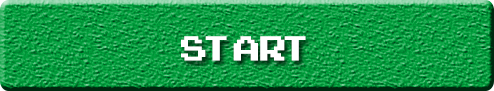
<style>
.page{position:relative;width:494px;height:91px}
.page>*{position:absolute;margin:0}
.t1{font:48px "ArcadeClassic";color:#ffffff}
</style>
<div class="page">
<p class="t1" style="left:181px;top:36px;width:125px;height:25px">start</p>
</div>
